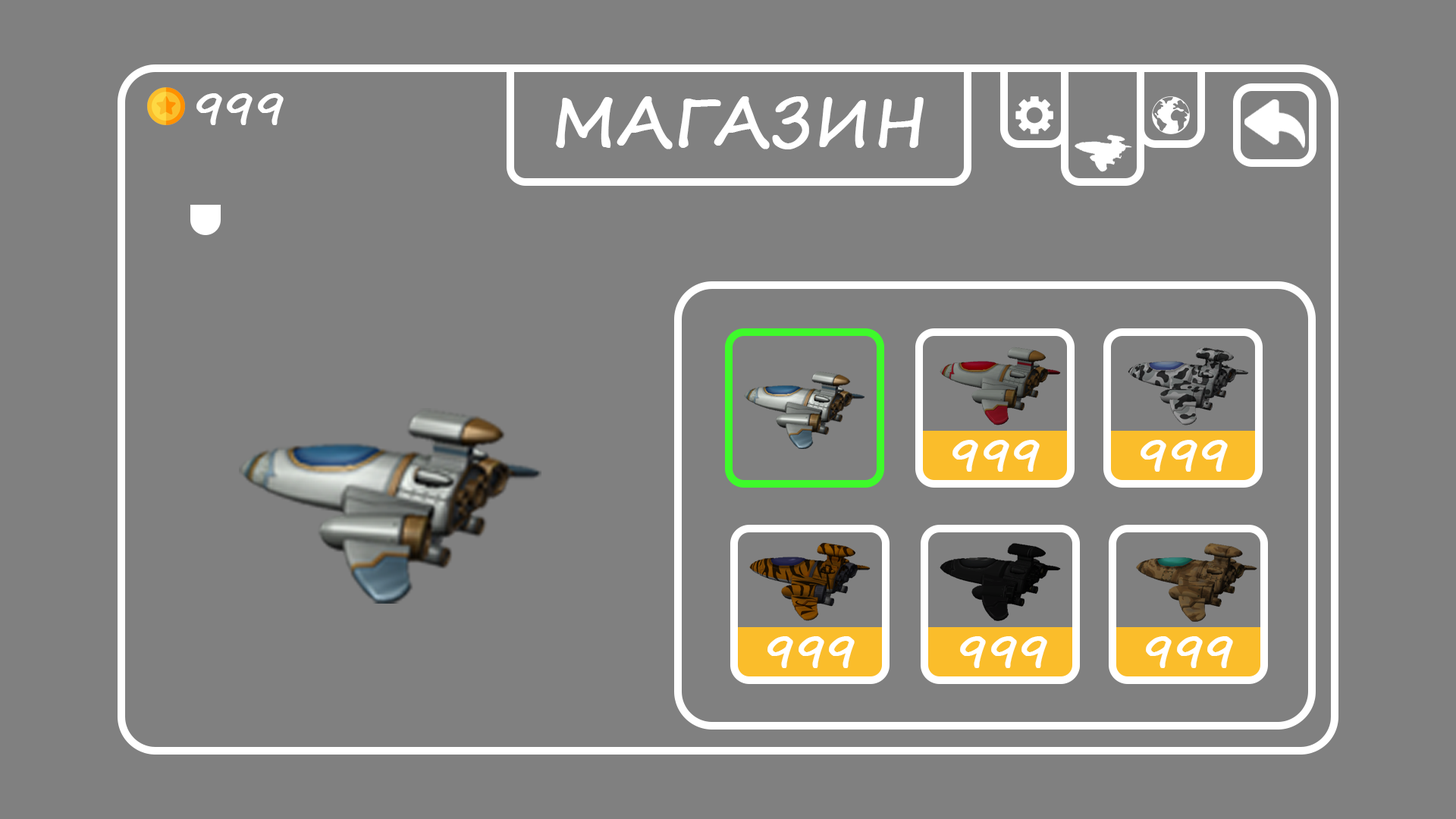
<style>
.page{position:relative;width:1456px;height:819px;background:#808080}
.page>*{position:absolute;margin:0}
.t1{font:47.4px "SegoePrint";color:#ffffff;font-weight:bold}
.t2{font:63.2px "SegoePrint";color:#ffffff;font-weight:bold}
</style>
<div class="page">
<p class="t1" style="left:196px;top:93px;width:88px;height:32px">999</p>
<p class="t2" style="left:556px;top:96px;width:368px;height:53px">МАГАЗИН</p>
<p class="t1" style="left:952px;top:440px;width:88px;height:32px">999</p>
<p class="t1" style="left:1141px;top:440px;width:87px;height:32px">999</p>
<p class="t1" style="left:767px;top:636px;width:88px;height:32px">999</p>
<p class="t1" style="left:960px;top:636px;width:87px;height:32px">999</p>
<p class="t1" style="left:1146px;top:636px;width:87px;height:32px">999</p>
</div>
